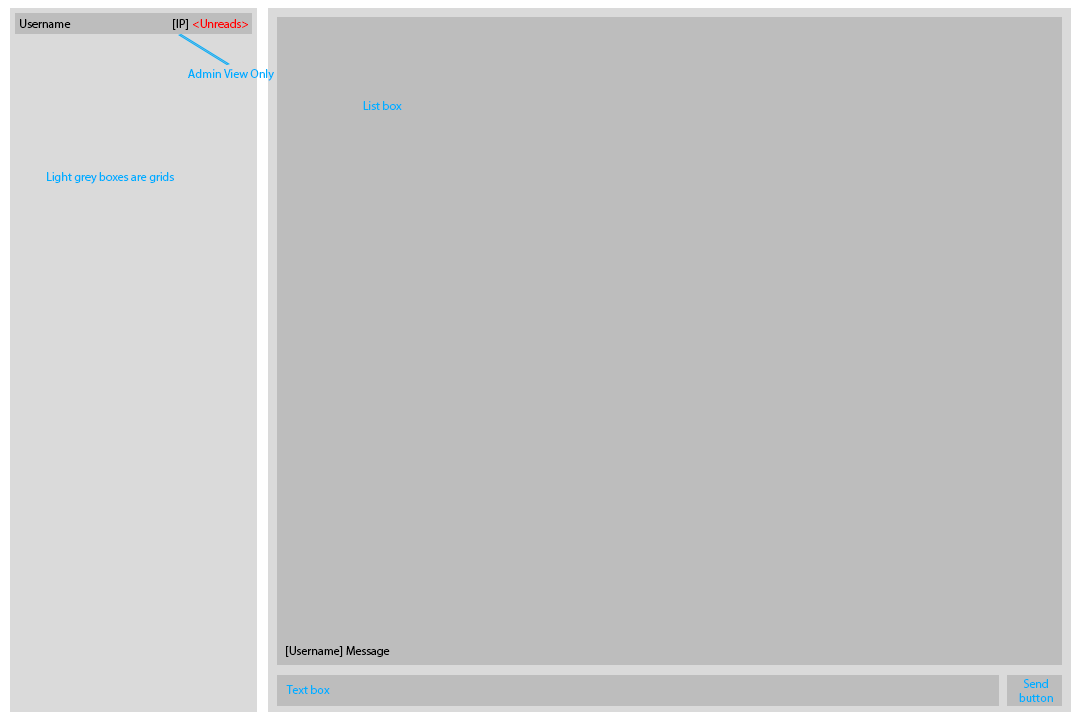
<style>
.page{position:relative;width:1080px;height:720px;background:#bdbdbd}
.page>*{position:absolute;margin:0}
.t1{font:12px "MyriadPro-Regular";color:#000000}
.t2{font:12px "MyriadPro-Regular";color:#ff0000}
.t3{font:12px "MyriadPro-Regular";color:#00aeff}
</style>
<div class="page">
<p class="t1" style="left:20px;top:19px;width:51px;height:9px">Username</p>
<p class="t1" style="left:173px;top:19px;width:15px;height:11px">[IP]</p>
<p class="t2" style="left:193px;top:19px;width:55px;height:9px">&lt;Unreads&gt;</p>
<p class="t3" style="left:188px;top:69px;width:86px;height:12px">Admin View Only</p>
<p class="t3" style="left:363px;top:101px;width:39px;height:9px">List box</p>
<p class="t3" style="left:47px;top:172px;width:127px;height:12px">Light grey boxes are grids</p>
<p class="t1" style="left:286px;top:646px;width:104px;height:11px">[Username] Message</p>
<p class="t3" style="left:286px;top:685px;width:44px;height:9px">Text box</p>
<p class="t3" style="left:1019px;top:679px;width:34px;height:23px;text-align:center">Send<br>button</p>
</div>
